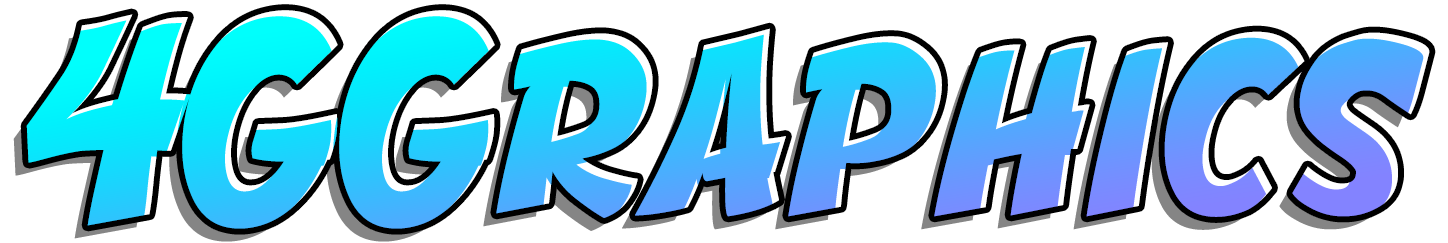
<style>
.page{position:relative;width:1448px;height:243px;background:#ffffff}
.page>*{position:absolute;margin:0}
.t1{font:434.5px "Engcomica"}
</style>
<div class="page">
<p class="t1" style="left:26px;top:10px;width:1404px;height:219px">4GGraphics</p>
</div>
